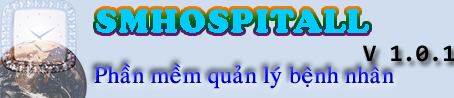
<style>
.page{position:relative;width:454px;height:98px;background:#cfddee}
.page>*{position:absolute;margin:0}
.t1{font:36px "CooperBlack";color:#00ccff}
.t2{font:24px "Consolas-Bold";color:#000000}
.t3{font:24px "VNI-Times"}
</style>
<div class="page">
<p class="t1" style="left:96px;top:9px;width:273px;height:24px">SMHOSPITALL</p>
<p class="t2" style="left:363px;top:45px;width:92px;height:17px">V 1.0.1</p>
<p class="t3" style="left:94px;top:63px;width:300px;height:26px">Phaàn meàm quaûn lyù beänh nhaân</p>
</div>
